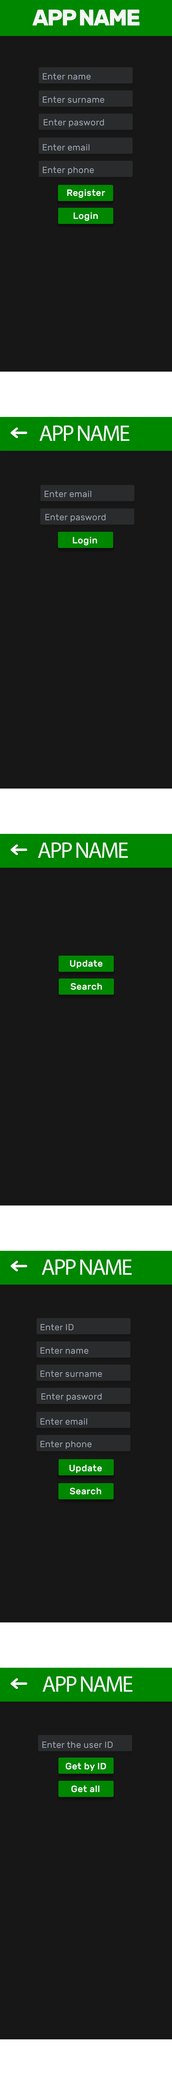
<style>
.page{position:relative;width:172px;height:2090px;background:#171717}
.page>*{position:absolute;margin:0}
.t1{font:22.6px "Rubik-Bold";letter-spacing:-0.06em;color:#f5f5f5}
.t2{font:8.8px "Rubik-Regular";letter-spacing:0.02em;color:#99a2af}
.t3{font:9.2px "Rubik-Medium";letter-spacing:0.02em;color:#f5f5f5}
.t4{font:22.6px "MyriadPro-Regular";letter-spacing:-0.06em;color:#f5f5f5}
</style>
<div class="page">
<p class="t1" style="left:32px;top:10px;width:107px;height:15px">APP NAME</p>
<p class="t2" style="left:43px;top:73px;width:47px;height:7px">Enter name</p>
<p class="t2" style="left:43px;top:96px;width:61px;height:7px">Enter surname</p>
<p class="t2" style="left:44px;top:119px;width:60px;height:8px">Enter pasword</p>
<p class="t2" style="left:43px;top:144px;width:46px;height:7px">Enter email</p>
<p class="t2" style="left:43px;top:167px;width:51px;height:8px">Enter phone</p>
<p class="t3" style="left:67px;top:189px;width:38px;height:9px">Register</p>
<p class="t3" style="left:73px;top:212px;width:25px;height:9px">Login</p>
<p class="t4" style="left:39px;top:425px;width:90px;height:16px">APP NAME</p>
<p class="t2" style="left:45px;top:491px;width:46px;height:6px">Enter email</p>
<p class="t2" style="left:45px;top:514px;width:60px;height:8px">Enter pasword</p>
<p class="t3" style="left:73px;top:537px;width:24px;height:8px">Login</p>
<p class="t4" style="left:38px;top:842px;width:90px;height:16px">APP NAME</p>
<p class="t3" style="left:70px;top:960px;width:32px;height:8px">Update</p>
<p class="t3" style="left:70px;top:983px;width:32px;height:7px">Search</p>
<p class="t4" style="left:42px;top:1259px;width:89px;height:16px">APP NAME</p>
<p class="t2" style="left:41px;top:1324px;width:32px;height:6px">Enter ID</p>
<p class="t2" style="left:40px;top:1347px;width:48px;height:7px">Enter name</p>
<p class="t2" style="left:40px;top:1370px;width:62px;height:7px">Enter surname</p>
<p class="t2" style="left:41px;top:1393px;width:60px;height:8px">Enter pasword</p>
<p class="t2" style="left:40px;top:1418px;width:47px;height:7px">Enter email</p>
<p class="t2" style="left:40px;top:1441px;width:51px;height:8px">Enter phone</p>
<p class="t3" style="left:69px;top:1465px;width:33px;height:8px">Update</p>
<p class="t3" style="left:70px;top:1488px;width:31px;height:6px">Search</p>
<p class="t4" style="left:42px;top:1676px;width:90px;height:16px">APP NAME</p>
<p class="t2" style="left:42px;top:1741px;width:70px;height:7px">Enter the user ID</p>
<p class="t3" style="left:66px;top:1763px;width:40px;height:8px">Get by ID</p>
<p class="t3" style="left:71px;top:1785px;width:28px;height:7px">Get all</p>
</div>
